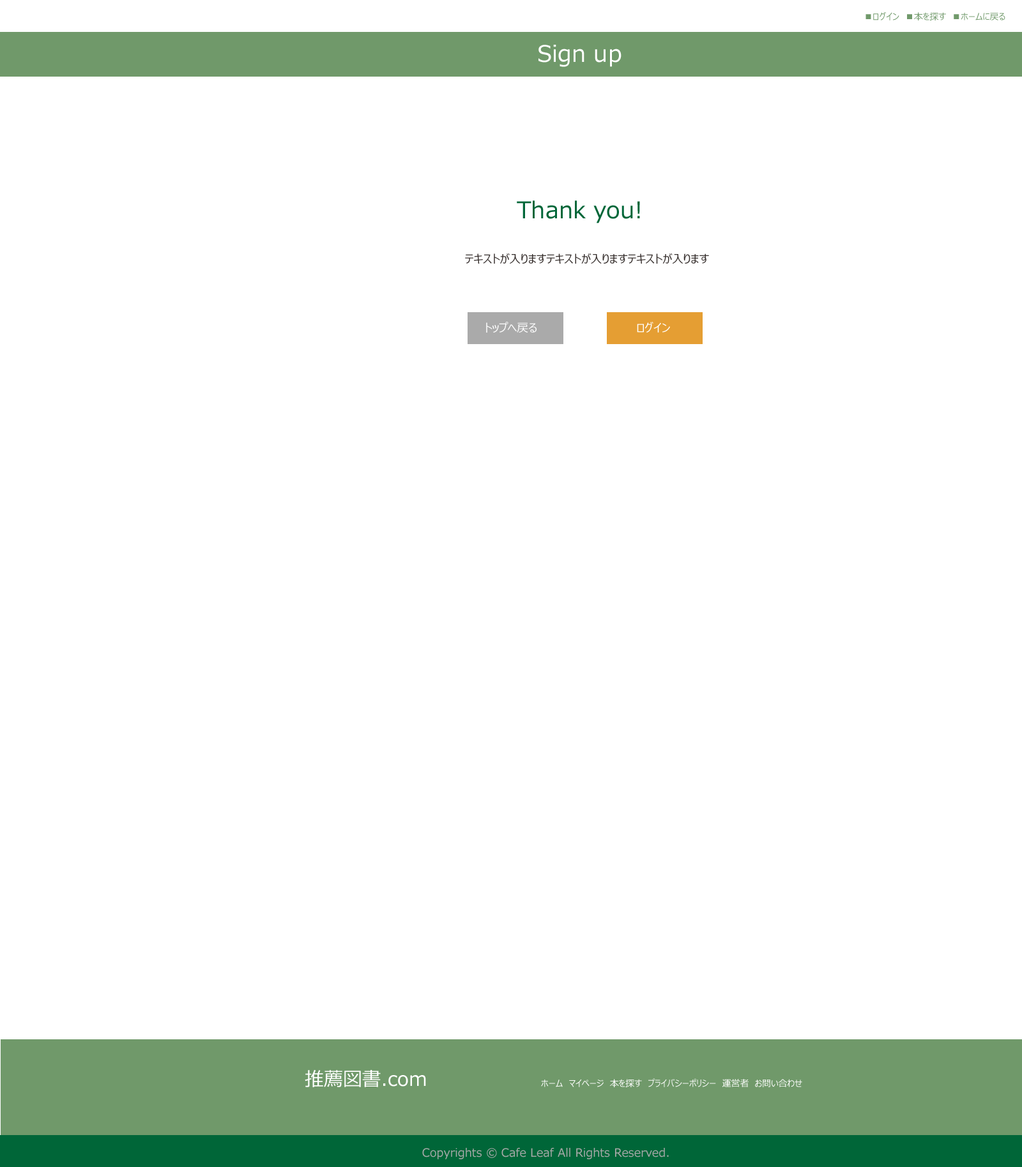
<style>
.page{position:relative;width:1022px;height:1167px;background:#ffffff}
.page>*{position:absolute;margin:0}
.t1{font:8.9px "MeiryoUI";color:#70996a}
.t2{font:22.9px "MeiryoUI";color:#ffffff}
.t3{font:23px "MeiryoUI";color:#006638}
.t4{font:11.5px "MeiryoUI";color:#362f2d}
.t5{font:11.5px "MeiryoUI";color:#ffffff}
.t6{font:19.1px "MeiryoUI";color:#ffffff}
.t7{font:8.9px "MeiryoUI";color:#ffffff}
.t8{font:11.5px "MeiryoUI";color:#aaaaaa}
</style>
<div class="page">
<p class="t1" style="left:865px;top:11px;width:140px;height:9px">■ログイン　■本を探す　■ホームに戻る</p>
<p class="t2" style="left:538px;top:45px;width:83px;height:22px">Sign up</p>
<p class="t3" style="left:517px;top:200px;width:123px;height:23px">Thank you!</p>
<p class="t4" style="left:465px;top:253px;width:244px;height:11px">テキストが入りますテキストが入りますテキストが入ります</p>
<p class="t5" style="left:486px;top:322px;width:50px;height:11px">トップへ戻る</p>
<p class="t5" style="left:637px;top:322px;width:33px;height:11px">ログイン</p>
<p class="t6" style="left:305px;top:1070px;width:121px;height:17px">推薦図書.com</p>
<p class="t7" style="left:541px;top:1078px;width:261px;height:9px">ホーム　マイページ　本を探す　プライバシーポリシー　運営者　お問い合わせ</p>
<p class="t8" style="left:422px;top:1148px;width:247px;height:12px">Copyrights © Cafe Leaf All Rights Reserved.</p>
</div>
